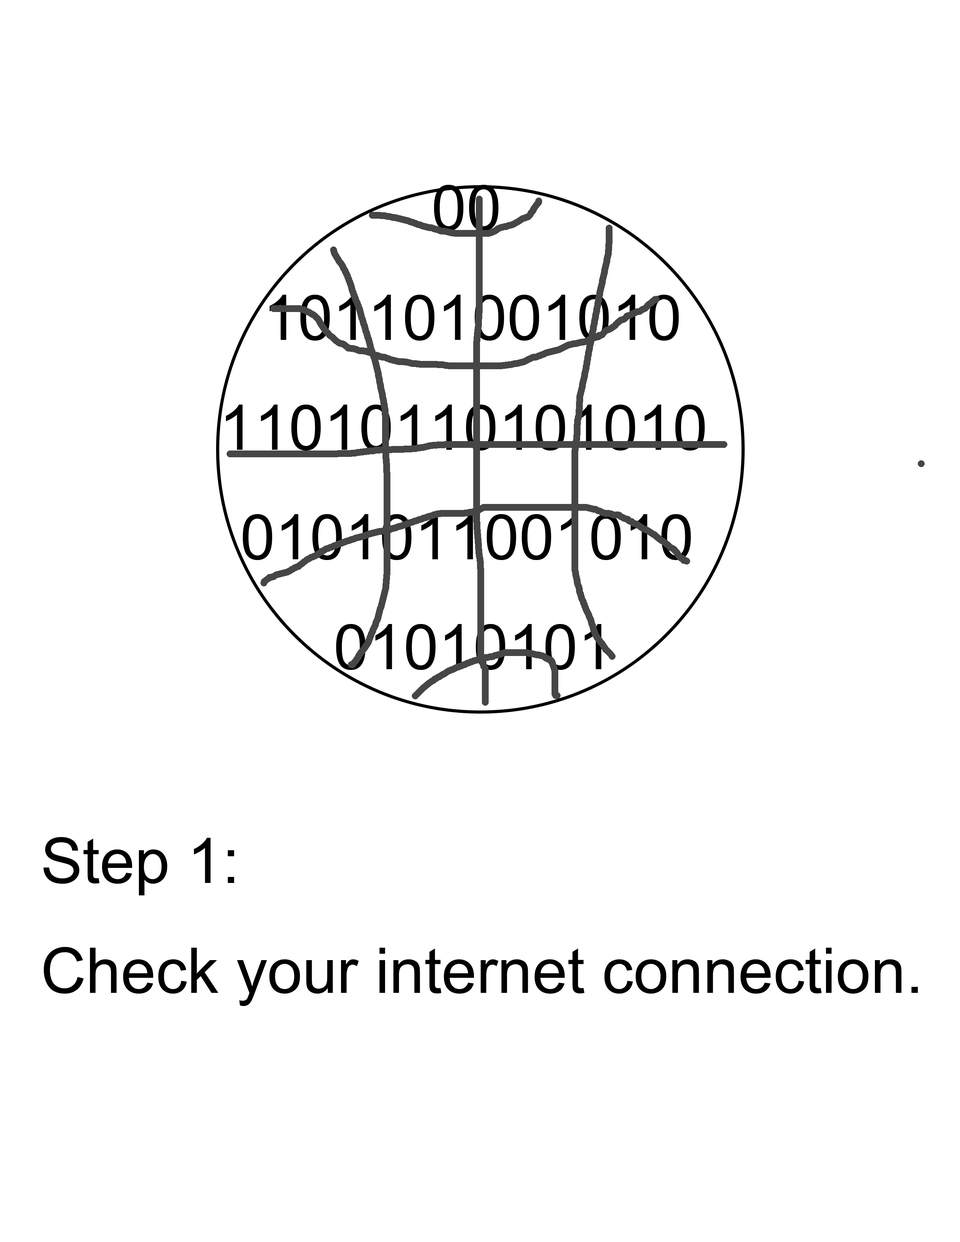
<style>
.page{position:relative;width:960px;height:1242px;background:#ffffff}
.page>*{position:absolute;margin:0}
.t1{font:62.7px "ArialMT";color:#000000}
</style>
<div class="page">
<p class="t1" style="left:43px;top:837px;width:875px;height:169px">Step 1:<br>Check your internet connection.</p>
</div>
